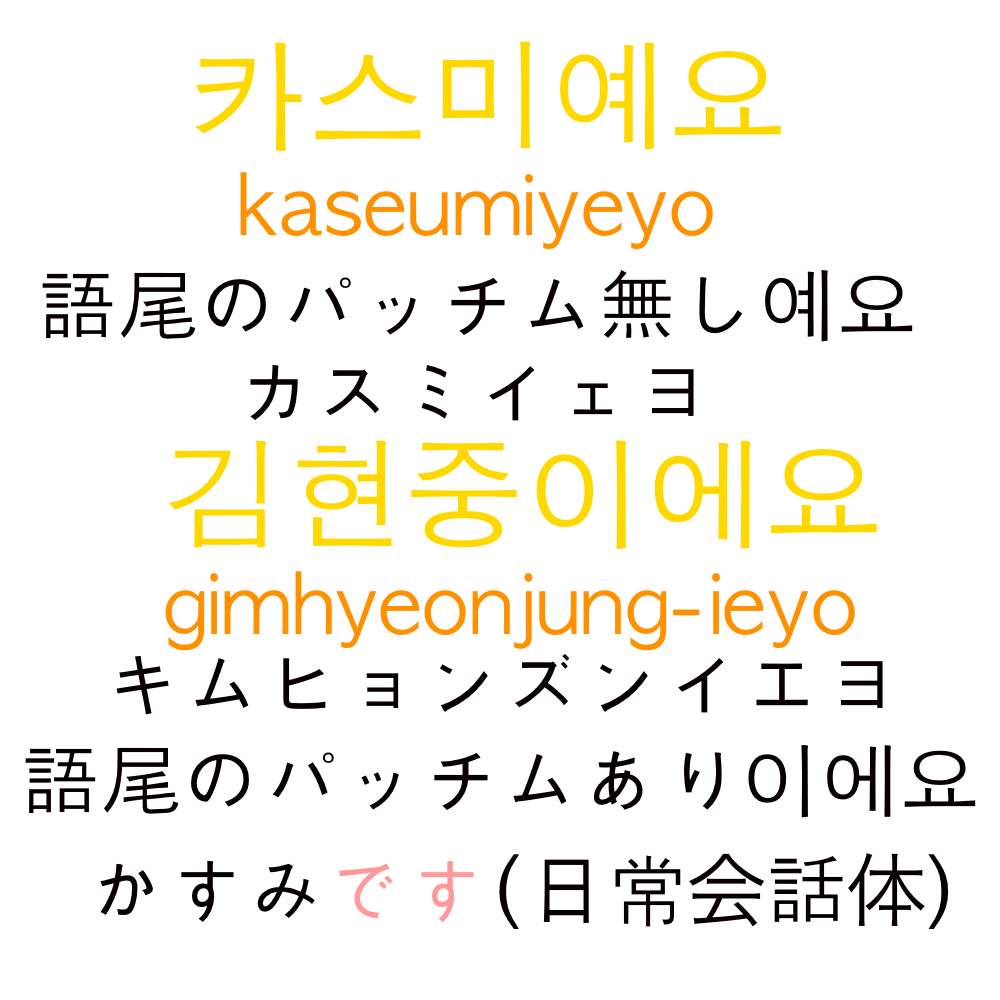
<style>
.page{position:relative;width:1000px;height:1000px;background:#ffffff}
.page>*{position:absolute;margin:0}
.t1{font:120px "AppleGothic";color:#ffd800}
.t2{font:80px "AppleGothic";color:#ff9000}
.t3{font:80px "AppleGothic";color:#080000}
.t4{font:80px "AppleGothic";color:#ff9999}
.t5{font:80px "HiraKakuProN-W3";color:#080000}
</style>
<div class="page">
<p class="t1" style="left:195px;top:41px;width:586px;height:110px">카스미예요</p>
<p class="t2" style="left:240px;top:172px;width:473px;height:78px">kaseumiyeyo</p>
<p class="t3" style="left:42px;top:270px;width:871px;height:72px">語尾のパッチム無し예요</p>
<p class="t3" style="left:250px;top:365px;width:444px;height:56px">カスミイェヨ</p>
<p class="t1" style="left:169px;top:440px;width:708px;height:109px">김현중이에요</p>
<p class="t2" style="left:165px;top:571px;width:690px;height:80px">gimhyeonjung-ieyo</p>
<p class="t3" style="left:116px;top:654px;width:767px;height:61px">キムヒョンズンイエヨ</p>
<p class="t3" style="left:25px;top:745px;width:951px;height:73px">語尾のパッチムあり이에요</p>
<p class="t3" style="left:100px;top:853px;width:849px;height:76px">かすみ<span class="t4">です</span>(日常<span class="t5">会</span>話<span class="t5">体</span>）</p>
</div>
